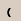
<style>
.page{position:relative;width:21px;height:21px;background:#d9cdc1}
.page>*{position:absolute;margin:0}
.t1{font:9px "Tahoma-Bold";color:#000000}
</style>
<div class="page">
<p class="t1" style="left:7px;top:8px;width:4px;height:9px">(</p>
</div>
